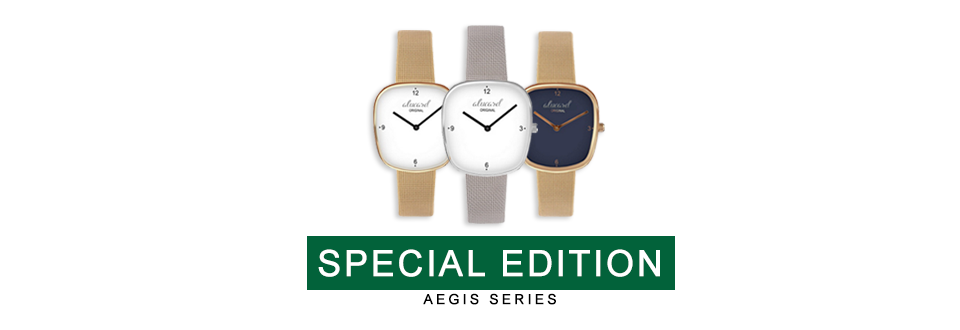
<style>
.page{position:relative;width:960px;height:330px;background:#ffffff}
.page>*{position:absolute;margin:0}
.t1{font:36px "ArialMT";letter-spacing:0.05em;color:#fefefe;font-weight:bold}
.t2{font:14px "ArialMT";letter-spacing:0.2em;color:#000000;font-weight:bold}
</style>
<div class="page">
<p class="t1" style="left:318px;top:249px;width:342px;height:28px">SPECIAL EDITION</p>
<p class="t2" style="left:423px;top:293px;width:133px;height:12px">AEGIS SERIES</p>
</div>
